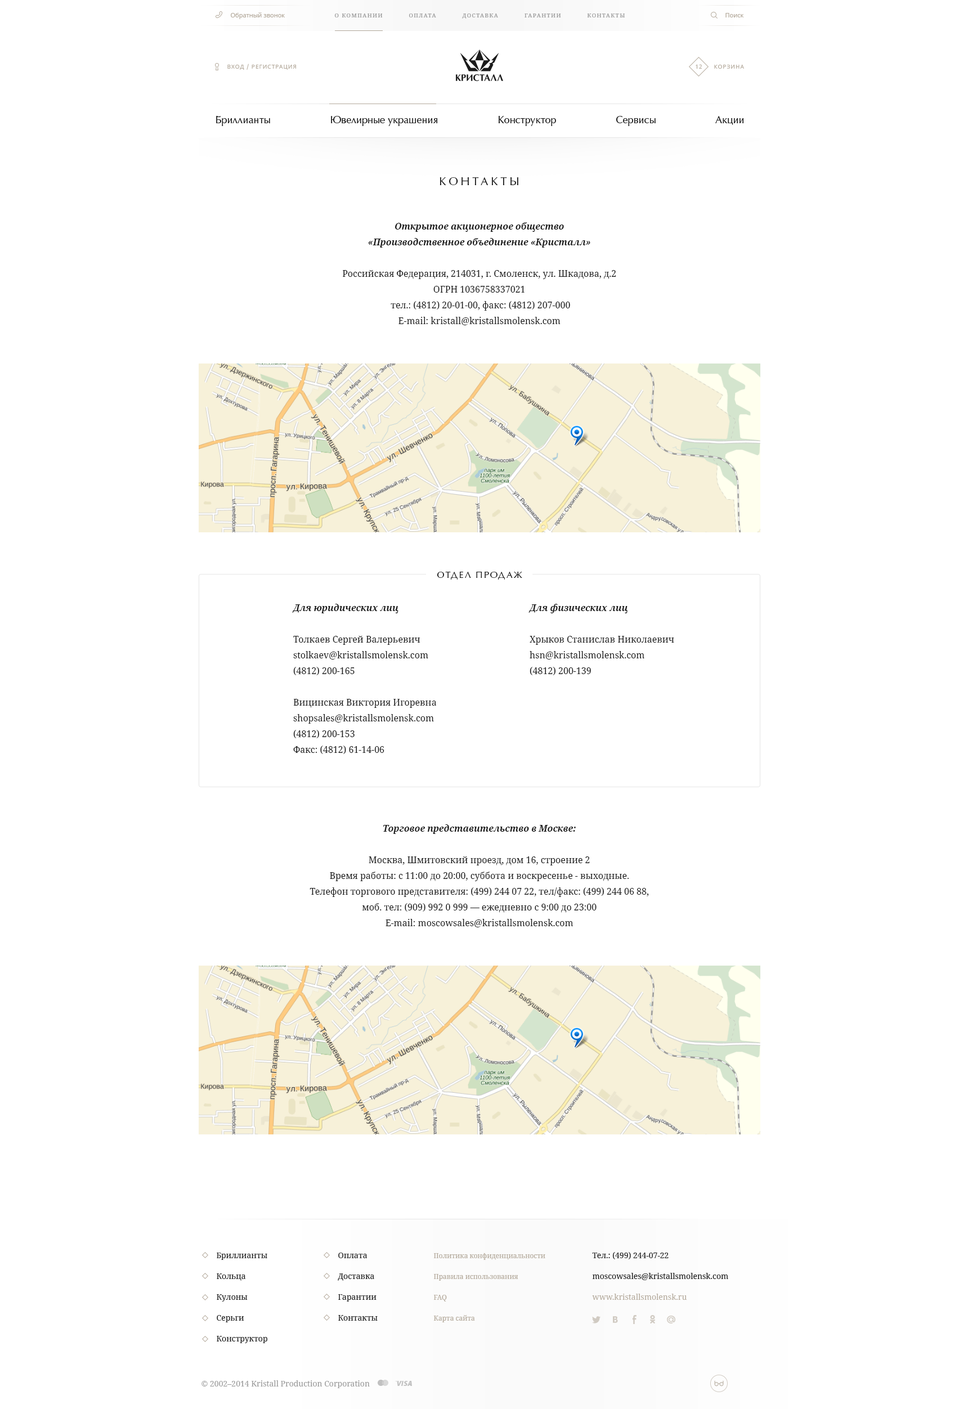
<style>
.page{position:relative;width:959px;height:1409px;background:#ffffff}
.page>*{position:absolute;margin:0}
.t1{font:11.2px "OptimaLTCYR-Roman";letter-spacing:0.25em;color:#1a1a1a;text-transform:uppercase}
.t2{font:9px/15.7px "NotoSerif";color:#1a1a1a}
.t3{font:9px/15.7px "NotoSerif-BoldItalic";color:#1a1a1a}
.t4{font:9px "OptimaLTCYR-Roman";letter-spacing:0.14em;color:#1a1a1a;text-transform:uppercase}
</style>
<div class="page">
<p class="t1" style="left:439px;top:177px;width:79px;height:8px">контакты</p>
<p class="t2" style="left:342px;top:222px;width:274px;height:103px;text-align:center"><span class="t3">Открытое акционерное общество <br>«Производственное объединение «Кристалл» <br></span><br>Российская Федерация, 214031, г. Смоленск, ул. Шкадова, д.2 <br>ОГРН 1036758337021 <br> тел.: (4812) 20-01-00, факс: (4812) 207-000 <br>E-mail: kristall@kristallsmolensk.com</p>
<p class="t4" style="left:437px;top:572px;width:85px;height:7px">Отдел продаж</p>
<p class="t2" style="left:292px;top:604px;width:144px;height:150px"><span class="t3">Для юридических лиц<br></span><br>Толкаев Сергей Валерьевич <br>stolkaev@kristallsmolensk.com <br>(4812) 200-165<br><br>Вицинская Виктория Игоревна <br>shopsales@kristallsmolensk.com <br>(4812) 200-153<br>Факс: (4812) 61-14-06</p>
<p class="t2" style="left:528px;top:604px;width:146px;height:71px"><span class="t3">Для физических лиц<br></span><br>Хрыков Станислав Николаевич  <br>hsn@kristallsmolensk.com     <br>(4812) 200-139</p>
<p class="t2" style="left:309px;top:824px;width:340px;height:103px;text-align:center"><span class="t3">Торговое представительство в Москве: <br><br></span>Москва, Шмитовский проезд, дом 16, строение 2 <br>Время работы: с 11:00 до 20:00, суббота и воскресенье - выходные. <br>Телефон торгового представителя: (499) 244 07 22, тел/факс: (499) 244 06 88, <br>моб. тел: (909) 992 0 999 — ежедневно с 9:00 до 23:00 <br>E-mail: moscowsales@kristallsmolensk.com</p>
</div>
